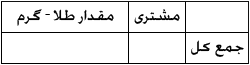
<style>
.page{position:relative;width:250px;height:65px;background:#ffffff}
.page>*{position:absolute;margin:0}
.t1{font:19.4px "Airstream";color:#000000}
</style>
<div class="page">
<p class="t1" style="left:17px;top:9px;width:97px;height:17px">مقدار طلا - گرم</p>
<p class="t1" style="left:134px;top:9px;width:46px;height:15px">مشتری</p>
<p class="t1" style="left:191px;top:40px;width:53px;height:17px">جمع کل</p>
</div>
